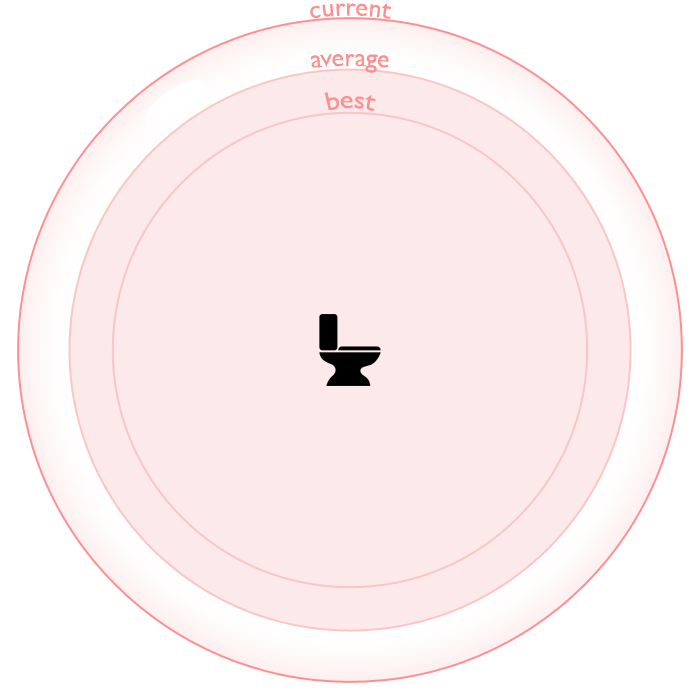
<style>
.page{position:relative;width:690px;height:690px;background:#fce9e9}
.page>*{position:absolute;margin:0}
.t1{font:25.6px "GillSans";color:#fc8f8f}
</style>
<div class="page">
<p class="t1" style="left:310px;top:3px;width:82px;height:16px">current</p>
<p class="t1" style="left:310px;top:54px;width:79px;height:19px">average</p>
<p class="t1" style="left:324px;top:92px;width:52px;height:19px">best</p>
</div>
